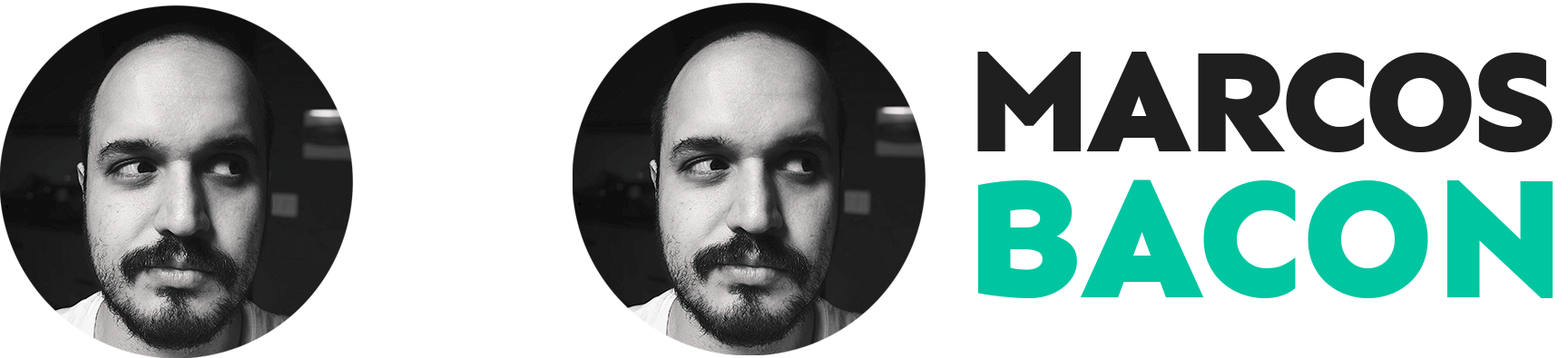
<style>
.page{position:relative;width:1568px;height:358px;background:#ffffff}
.page>*{position:absolute;margin:0}
.t1{font:149.4px "Sen-ExtraBold";letter-spacing:-0.03em;color:#1f1f1f}
.t2{font:176.2px "Sen-ExtraBold";color:#00c5a1}
</style>
<div class="page">
<p class="t1" style="left:977px;top:52px;width:576px;height:100px">MARCOS</p>
<p class="t2" style="left:978px;top:180px;width:575px;height:119px">BACON</p>
</div>
